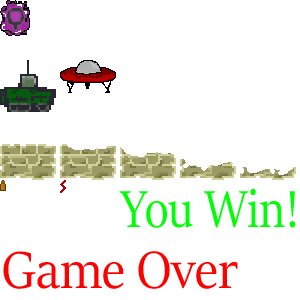
<style>
.page{position:relative;width:300px;height:300px;background:#ffffff}
.page>*{position:absolute;margin:0}
.t1{font:58.6px "SitkaBanner";color:#00ff06;scale:0.87 1}
.t2{font:58.6px "SitkaBanner";color:#ff0000;scale:0.94 1}
</style>
<div class="page">
<p class="t1" style="left:119px;top:188px;width:177px;height:40px">You Win!</p>
<p class="t2" style="left:3px;top:251px;width:235px;height:38px">Game Over</p>
</div>
